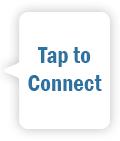
<style>
.page{position:relative;width:120px;height:141px;background:#ffffff}
.page>*{position:absolute;margin:0}
.t1{font:23.3px "FranklinGothic-DemiCond";color:#2c73a1}
</style>
<div class="page">
<p class="t1" style="left:28px;top:47px;width:74px;height:44px;text-align:center">Tap to<br>Connect</p>
</div>
